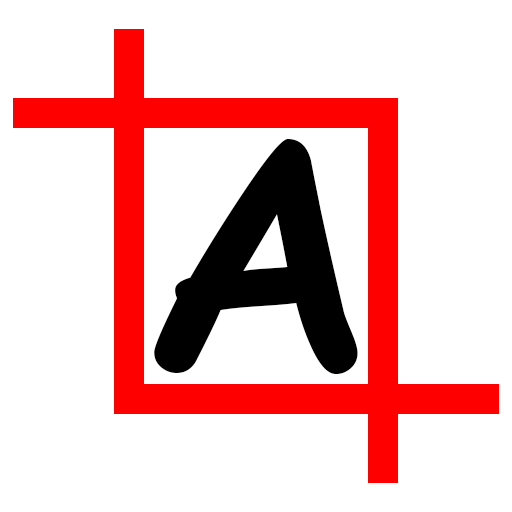
<style>
.page{position:relative;width:512px;height:512px;background:#ffffff}
.page>*{position:absolute;margin:0}
.t1{font:317.9px "ComicSansMS-Bold";color:#000000}
</style>
<div class="page">
<p class="t1" style="left:154px;top:139px;width:204px;height:235px">A</p>
</div>
